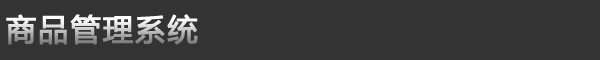
<style>
.page{position:relative;width:600px;height:60px;background:#333333}
.page>*{position:absolute;margin:0}
.t1{font:30px "MicrosoftYaHei";letter-spacing:0.05em;font-weight:bold}
</style>
<div class="page">
<p class="t1" style="left:6px;top:14px;width:192px;height:31px">商品管理系统</p>
</div>
